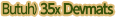
<style>
.page{position:relative;width:116px;height:18px;background:#dfbc76}
.page>*{position:absolute;margin:0}
.t1{font:14px "UDShinGoPro-Bold";letter-spacing:-0.08em;color:#375309;scale:0.9 1}
.t2{font:14px "UDShinGoPro-DeBold";letter-spacing:-0.08em;color:#375309;scale:0.9 1}
.t3{font:12px "UDShinGoPro-DeBold";letter-spacing:-0.08em;color:#375309;scale:0.9 1}
.t4{font:12px "UDShinGoPro-Bold";letter-spacing:-0.08em;color:#375309;scale:0.9 1}
</style>
<div class="page">
<p class="t1" style="left:2px;top:2px;width:112px;height:13px"><span class="t2">Butuh</span><span class="t3">) </span>35<span class="t4">x</span> Devmats</p>
</div>
